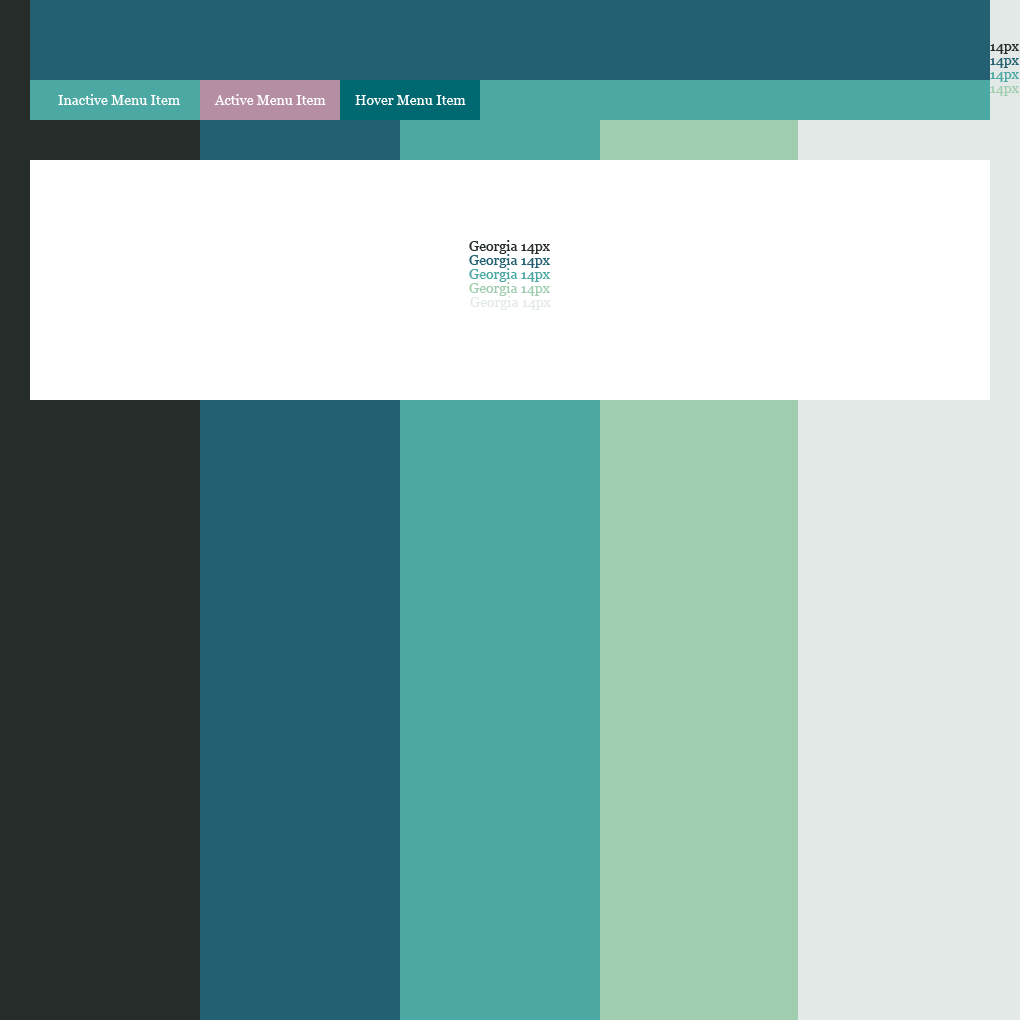
<style>
.page{position:relative;width:1020px;height:1020px;background:#ffffff}
.page>*{position:absolute;margin:0}
.t1{font:14px "Georgia"}
.t2{font:14px "Georgia";color:#ffffff}
.t3{font:14px "Georgia";color:#262c2a}
.t4{font:14px "Georgia";color:#236071}
.t5{font:14px "Georgia";color:#4ba8a2}
.t6{font:14px "Georgia";color:#a0cdaf}
.t7{font:14px "Georgia";color:#e2e9e6}
</style>
<div class="page">
<p class="t1" style="left:938px;top:40px;width:81px;height:14px">Georgia 14px</p>
<p class="t2" style="left:58px;top:94px;width:122px;height:11px">Inactive Menu Item</p>
<p class="t2" style="left:214px;top:94px;width:112px;height:11px">Active Menu Item</p>
<p class="t2" style="left:355px;top:95px;width:111px;height:10px">Hover Menu Item</p>
<p class="t3" style="left:469px;top:240px;width:81px;height:14px">Georgia 14px</p>
<p class="t4" style="left:469px;top:254px;width:81px;height:14px">Georgia 14px</p>
<p class="t5" style="left:469px;top:268px;width:81px;height:14px">Georgia 14px</p>
<p class="t6" style="left:469px;top:282px;width:81px;height:14px">Georgia 14px</p>
<p class="t7" style="left:470px;top:296px;width:81px;height:14px">Georgia 14px</p>
</div>
